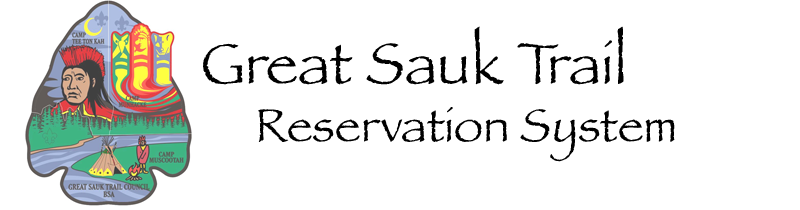
<style>
.page{position:relative;width:800px;height:210px;background:#ffffff}
.page>*{position:absolute;margin:0}
.t1{font:48px "Papyrus";color:#000000}
.t2{font:60px "Papyrus";color:#000000}
</style>
<div class="page">
<p class="t1" style="left:203px;top:26px;width:472px;height:136px"><span class="t2">Great Sauk Trail<br></span>     Reservation System</p>
</div>
